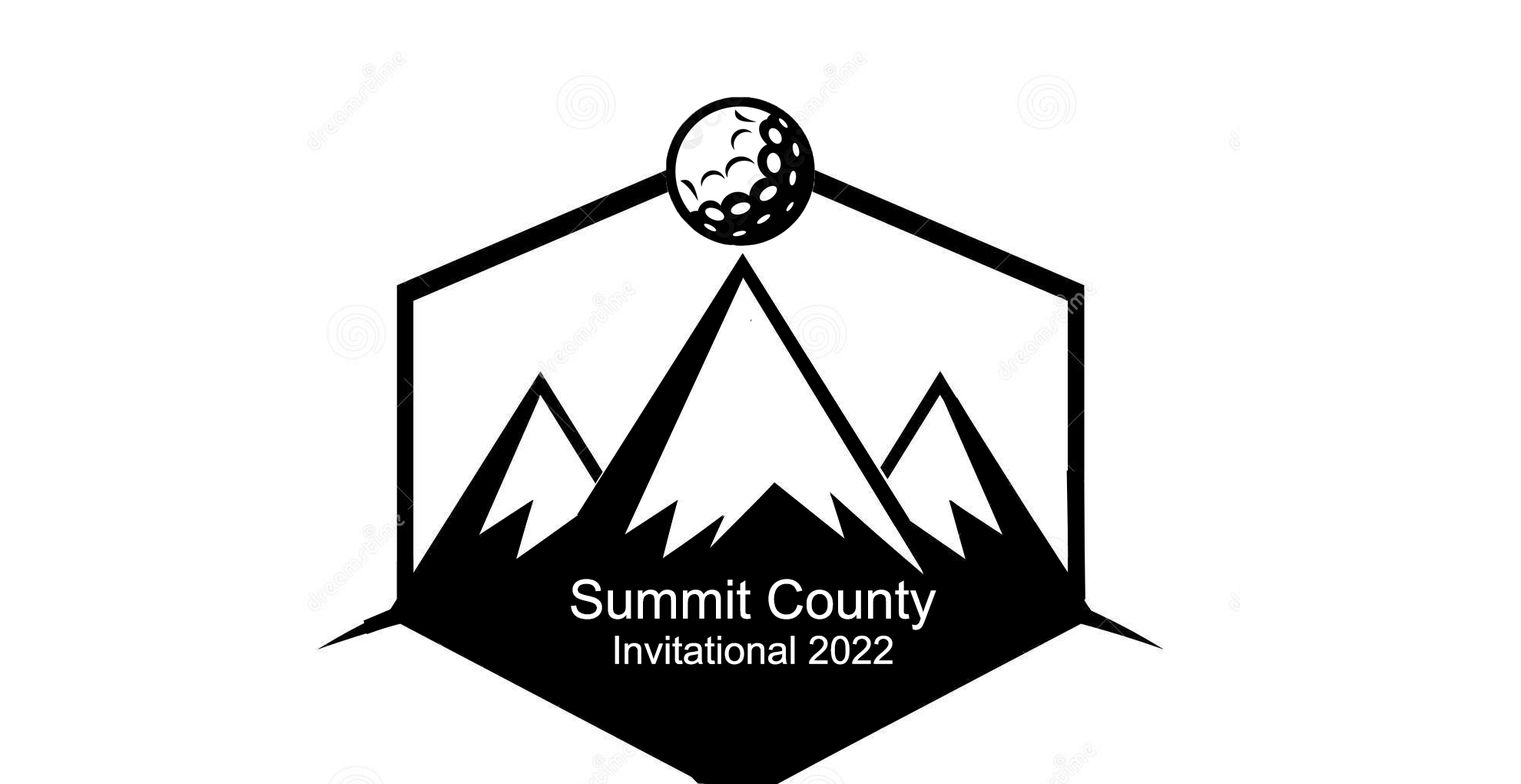
<style>
.page{position:relative;width:1521px;height:784px;background:#ffffff}
.page>*{position:absolute;margin:0}
.t1{font:53.8px "ArialMT";color:#ffffff}
.t2{font:38.8px "ArialMT";color:#ffffff}
</style>
<div class="page">
<p class="t1" style="left:571px;top:579px;width:366px;height:51px">Summit County</p>
<p class="t2" style="left:615px;top:635px;width:278px;height:30px">Invitational 2022</p>
</div>
